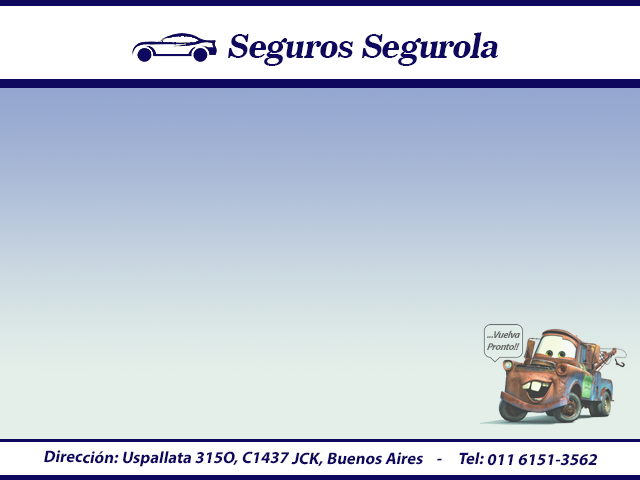
<style>
.page{position:relative;width:640px;height:480px}
.page>*{position:absolute;margin:0}
.t1{font:33.3px "News706BT-BoldC";letter-spacing:-0.025em;color:#0e085e;font-style:italic}
.t2{font:10px "MyriadPro-BoldIt";letter-spacing:-0.05em;color:#646562;font-style:italic}
.t3{font:16.7px "MyriadPro-Bold";color:#0e085e;font-style:italic}
</style>
<div class="page">
<p class="t1" style="left:228px;top:32px;width:271px;height:34px">Seguros Segurola</p>
<p class="t2" style="left:487px;top:330px;width:34px;height:20px;text-align:center">...Vuelva<br>Pronto!!</p>
<p class="t3" style="left:44px;top:450px;width:554px;height:17px">Dirección: Uspallata 315O, C1437 JCK, Buenos Aires    -     Tel: 011 6151-3562</p>
</div>
